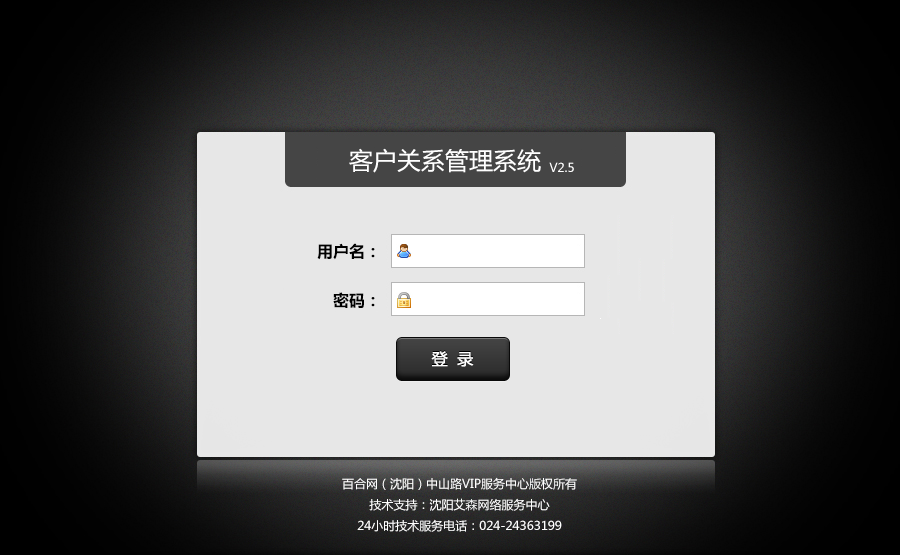
<style>
.page{position:relative;width:900px;height:555px;background:#e7e7e7}
.page>*{position:absolute;margin:0}
.t1{font:24px "MicrosoftYaHei";color:#ffffff}
.t2{font:12px "MicrosoftYaHei";color:#ffffff}
.t3{font:16px "MicrosoftYaHei-Bold";color:#000000}
.t4{font:16px "MicrosoftYaHei";color:#ffffff;text-transform:uppercase}
</style>
<div class="page">
<p class="t1" style="left:349px;top:148px;width:192px;height:25px">客户关系管理系统</p>
<p class="t2" style="left:549px;top:162px;width:25px;height:10px">V2.5</p>
<p class="t3" style="left:317px;top:243px;width:58px;height:17px">用户名：</p>
<p class="t3" style="left:333px;top:292px;width:42px;height:16px">密码：</p>
<p class="t4" style="left:431px;top:351px;width:43px;height:16px">登  录</p>
<p class="t2" style="left:342px;top:477px;width:235px;height:55px;text-align:center">百合网（沈阳）中山路VIP服务中心版权所有<br>技术支持：沈阳艾森网络服务中心<br>24小时技术服务电话：024-24363199</p>
</div>
